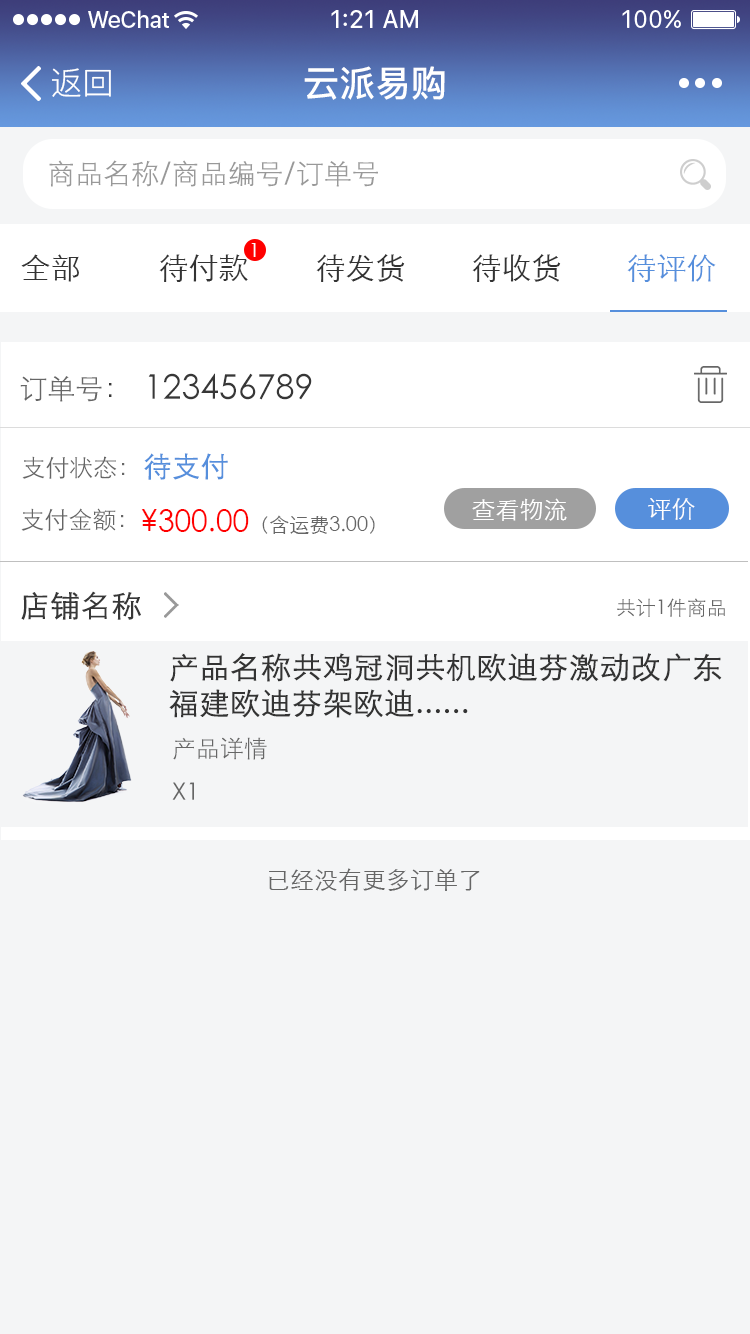
<style>
.page{position:relative;width:750px;height:1334px;background:#f4f5f6}
.page>*{position:absolute;margin:0}
.t1{font:32px "PingFang-SC-Regular";color:#ffffff}
.t2{font:36px "PingFang-SC-Bold";color:#ffffff}
.t3{font:28px "STXihei";color:#999999}
.t4{font:20px "STXihei";color:#fcfcfc}
.t5{font:30px "STXihei";color:#333333}
.t6{font:30px "STXihei";color:#568fdc}
.t7{font:28px "STXihei";color:#666666}
.t8{font:28px "STXihei";color:#373737}
.t9{font:34px "STXihei";color:#373737}
.t10{font:24px "STXihei";color:#666666}
.t11{font:28px "STXihei";color:#568fdc;font-weight:bold}
.t12{font:20px "STXihei";color:#666666}
.t13{font:30px "STXihei";color:#ff0000}
.t14{font:24px "STXihei";color:#ffffff}
.t15{font:24px "STXihei";color:#fefefe}
.t16{font:30px "STXihei";color:#373737;font-weight:bold}
.t17{font:30px "STXihei";color:#333333;font-weight:bold}
</style>
<div class="page">
<p class="t1" style="left:52px;top:68px;width:59px;height:29px">返回</p>
<p class="t2" style="left:304px;top:66px;width:141px;height:34px">云派易购</p>
<p class="t3" style="left:49px;top:160px;width:329px;height:27px">商品名称/商品编号/订单号</p>
<p class="t4" style="left:251px;top:243px;width:5px;height:14px">1</p>
<p class="t5" style="left:21px;top:254px;width:58px;height:28px">全部</p>
<p class="t5" style="left:159px;top:254px;width:89px;height:28px">待付款</p>
<p class="t5" style="left:316px;top:254px;width:89px;height:28px">待发货</p>
<p class="t5" style="left:472px;top:254px;width:89px;height:28px">待收货</p>
<p class="t6" style="left:627px;top:254px;width:89px;height:28px">待评价</p>
<p class="t7" style="left:20px;top:376px;width:92px;height:26px">订单号<span class="t8">：</span></p>
<p class="t9" style="left:148px;top:373px;width:164px;height:27px">123456789</p>
<p class="t10" style="left:22px;top:456px;width:103px;height:23px">支付状态：</p>
<p class="t11" style="left:144px;top:453px;width:84px;height:27px">待支付</p>
<p class="t10" style="left:21px;top:508px;width:103px;height:23px">支付金额：</p>
<p class="t12" style="left:141px;top:509px;width:234px;height:25px"><span class="t13">¥300.00</span>（含运费3.00）</p>
<p class="t14" style="left:472px;top:498px;width:95px;height:23px">查看物流</p>
<p class="t15" style="left:648px;top:498px;width:47px;height:22px">评价</p>
<p class="t16" style="left:21px;top:591px;width:120px;height:29px">店铺名称</p>
<p class="t12" style="left:617px;top:598px;width:108px;height:19px">共计1件商品</p>
<p class="t17" style="left:169px;top:653px;width:553px;height:65px">产品名称共鸡冠洞共机欧迪芬激动改广东福建欧迪芬架欧迪......</p>
<p class="t10" style="left:173px;top:737px;width:94px;height:23px">产品详情</p>
<p class="t10" style="left:172px;top:782px;width:22px;height:18px">X1</p>
<p class="t10" style="left:269px;top:868px;width:211px;height:23px">已经没有更多订单了</p>
</div>
